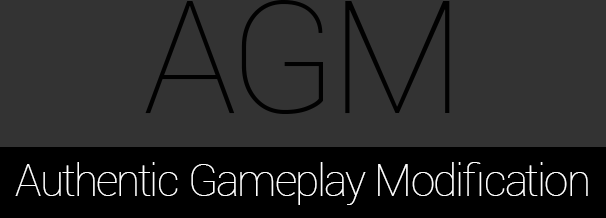
<style>
.page{position:relative;width:606px;height:218px;background:#333333}
.page>*{position:absolute;margin:0}
.t1{font:156.7px "Roboto-Thin";color:#010101}
.t2{font:43.8px "Roboto-Thin";letter-spacing:-0.02em;color:#ffffff}
</style>
<div class="page">
<p class="t1" style="left:145px;top:0px;width:305px;height:114px">AGM</p>
<p class="t2" style="left:15px;top:162px;width:573px;height:43px">Authentic Gameplay Modification</p>
</div>
